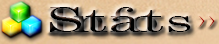
<style>
.page{position:relative;width:219px;height:44px}
.page>*{position:absolute;margin:0}
.t1{font:33.5px "Century";color:#000000;scale:1.8 1}
.t2{font:33.5px "Century";scale:1.8 1}
.t3{font:33.3px "NuevaStd-Cond";color:#880000}
</style>
<div class="page">
<p class="t1" style="left:49px;top:7px;width:142px;height:25px">Stats</p>
<p class="t2" style="left:50px;top:7px;width:107px;height:25px">Info</p>
<p class="t3" style="left:199px;top:16px;width:16px;height:11px">&gt;&gt;</p>
</div>
